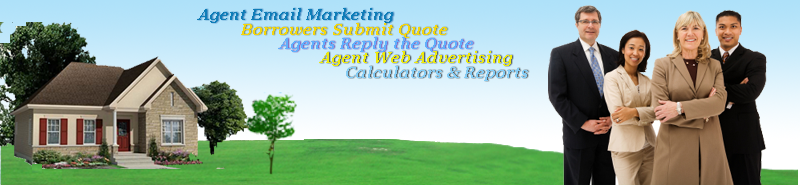
<style>
.page{position:relative;width:800px;height:185px}
.page>*{position:absolute;margin:0}
.t1{font:16px "Georgia-BoldItalic";color:#0f7db8}
.t2{font:16px "Georgia-BoldItalic";color:#f4d60b}
.t3{font:16px "Georgia-BoldItalic";color:#61affc}
.t4{font:16px "Georgia-BoldItalic";color:#edea0e}
.t5{font:16px "Georgia-BoldItalic";color:#84ccf5}
</style>
<div class="page">
<p class="t1" style="left:197px;top:8px;width:196px;height:15px">Agent Email Marketing</p>
<p class="t2" style="left:241px;top:23px;width:206px;height:15px">Borrowers Submit Quote</p>
<p class="t3" style="left:278px;top:37px;width:195px;height:15px">Agents Reply the Quote</p>
<p class="t4" style="left:319px;top:51px;width:193px;height:15px">Agent Web Advertising</p>
<p class="t5" style="left:346px;top:66px;width:182px;height:15px">Calculators &amp; Reports</p>
</div>
